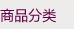
<style>
.page{position:relative;width:74px;height:29px;background:#edecea}
.page>*{position:absolute;margin:0}
.t1{font:14px "MicrosoftYaHei";color:#610249}
</style>
<div class="page">
<p class="t1" style="left:0px;top:8px;width:56px;height:15px">商品分类</p>
</div>
